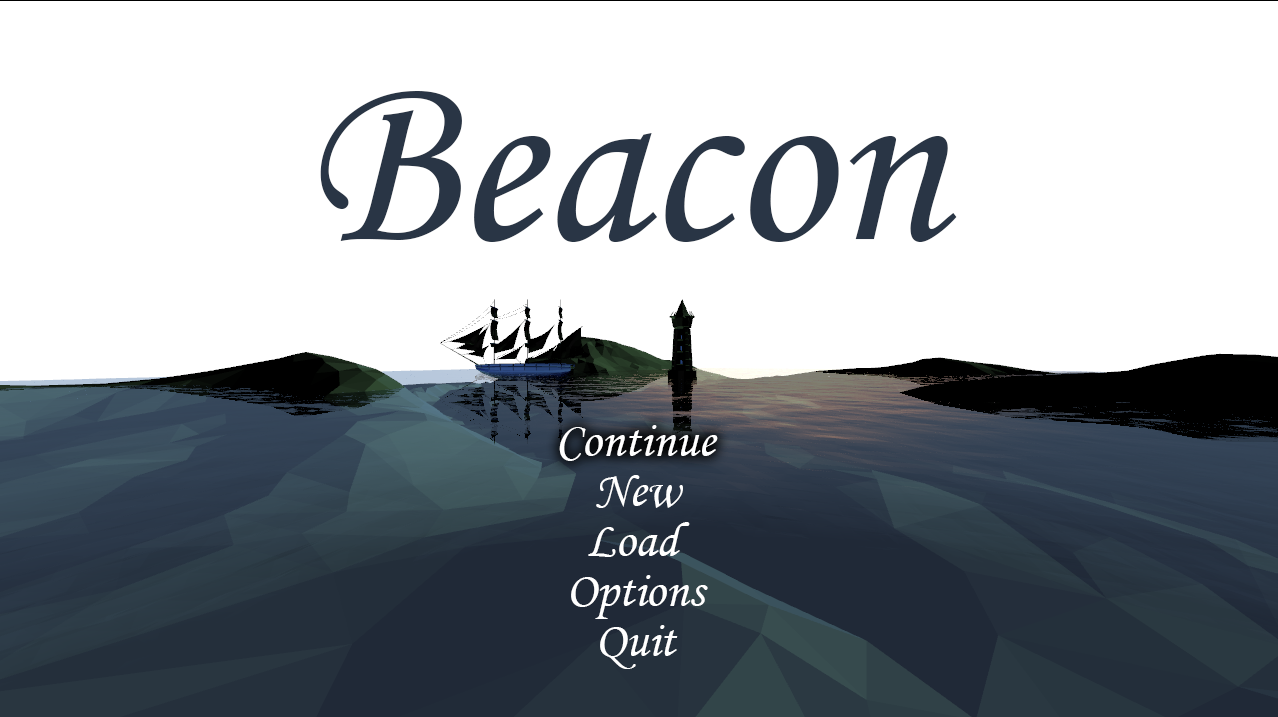
<style>
.page{position:relative;width:1278px;height:717px;background:#ffffff}
.page>*{position:absolute;margin:0}
.t1{font:250px "MonotypeCorsiva";color:#293545}
.t2{font:50px "MonotypeCorsiva";color:#ffffff}
</style>
<div class="page">
<p class="t1" style="left:320px;top:91px;width:637px;height:151px">Beacon</p>
<p class="t2" style="left:559px;top:425px;width:159px;height:36px">Continue</p>
<p class="t2" style="left:596px;top:475px;width:87px;height:33px">New</p>
<p class="t2" style="left:588px;top:522px;width:102px;height:35px">Load</p>
<p class="t2" style="left:571px;top:575px;width:137px;height:44px">Options</p>
<p class="t2" style="left:600px;top:625px;width:78px;height:44px">Quit</p>
</div>
